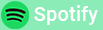
<style>
.page{position:relative;width:103px;height:30px;background:#8cecb8}
.page>*{position:absolute;margin:0}
.t1{font:20px "Roboto-Medium";color:#ffffff}
</style>
<div class="page">
<p class="t1" style="left:34px;top:5px;width:64px;height:20px">Spotify</p>
</div>
